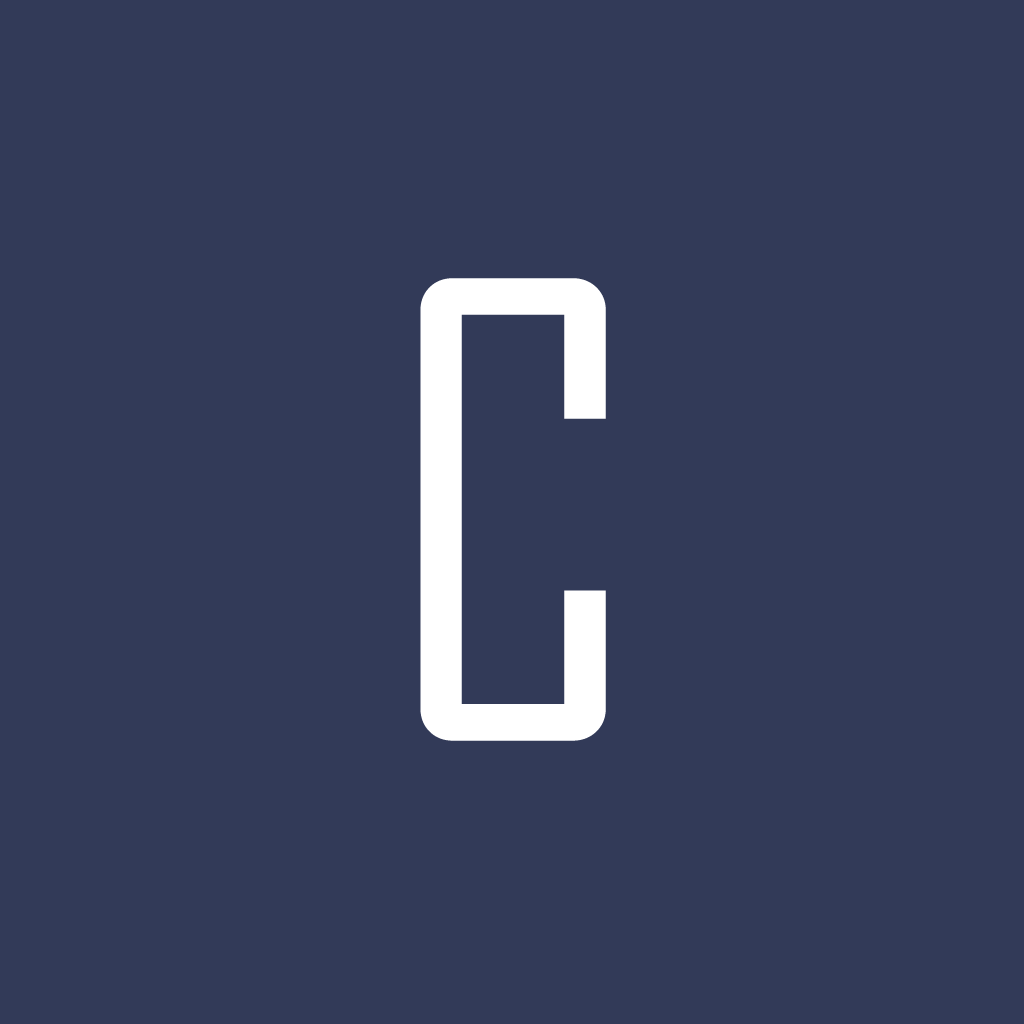
<style>
.page{position:relative;width:1024px;height:1024px;background:#323a58}
.page>*{position:absolute;margin:0}
.t1{font:605px "AgencyFB-Reg";color:#ffffff}
</style>
<div class="page">
<p class="t1" style="left:420px;top:278px;width:186px;height:463px">C</p>
</div>
